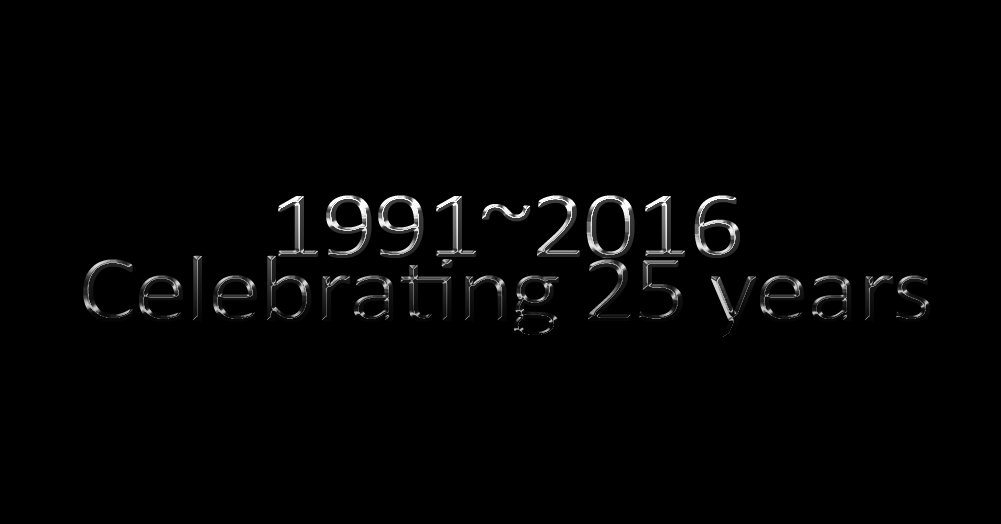
<style>
.page{position:relative;width:1001px;height:524px;background:#000000}
.page>*{position:absolute;margin:0}
.t1{font:96px/64px "Calibri";letter-spacing:-0.025em;scale:1.14 1}
</style>
<div class="page">
<p class="t1" style="left:83px;top:195px;width:848px;height:143px;text-align:center">1991~2016<br>Celebrating 25 years</p>
</div>
